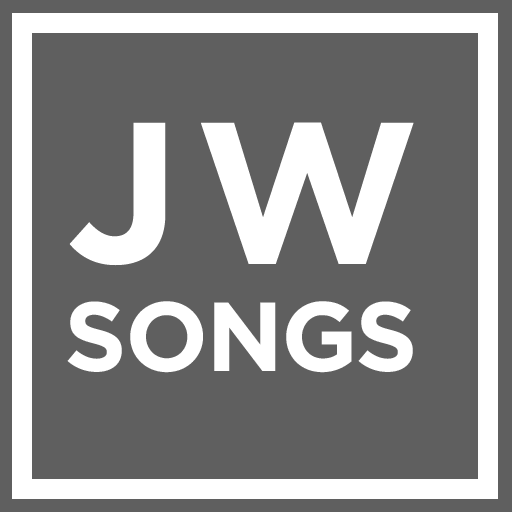
<style>
.page{position:relative;width:512px;height:512px;background:#5f5f5f}
.page>*{position:absolute;margin:0}
.t1{font:200px "Gotham-Bold";letter-spacing:0.075em;color:#fefeff}
.t2{font:98px "Gotham-Bold";letter-spacing:-0.025em;color:#ffffff}
</style>
<div class="page">
<p class="t1" style="left:69px;top:122px;width:345px;height:144px">JW</p>
<p class="t2" style="left:67px;top:301px;width:346px;height:72px">SONGS</p>
</div>
